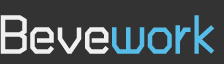
<style>
.page{position:relative;width:224px;height:64px;background:#333333}
.page>*{position:absolute;margin:0}
.t1{font:56px "MFShangHei_Noncommercial-Regular";color:#f0f0f0}
.t2{font:56px "MFShangHei_Noncommercial-Regular";color:#55bde8}
</style>
<div class="page">
<p class="t1" style="left:0px;top:15px;width:215px;height:39px">Beve<span class="t2">work</span></p>
</div>
